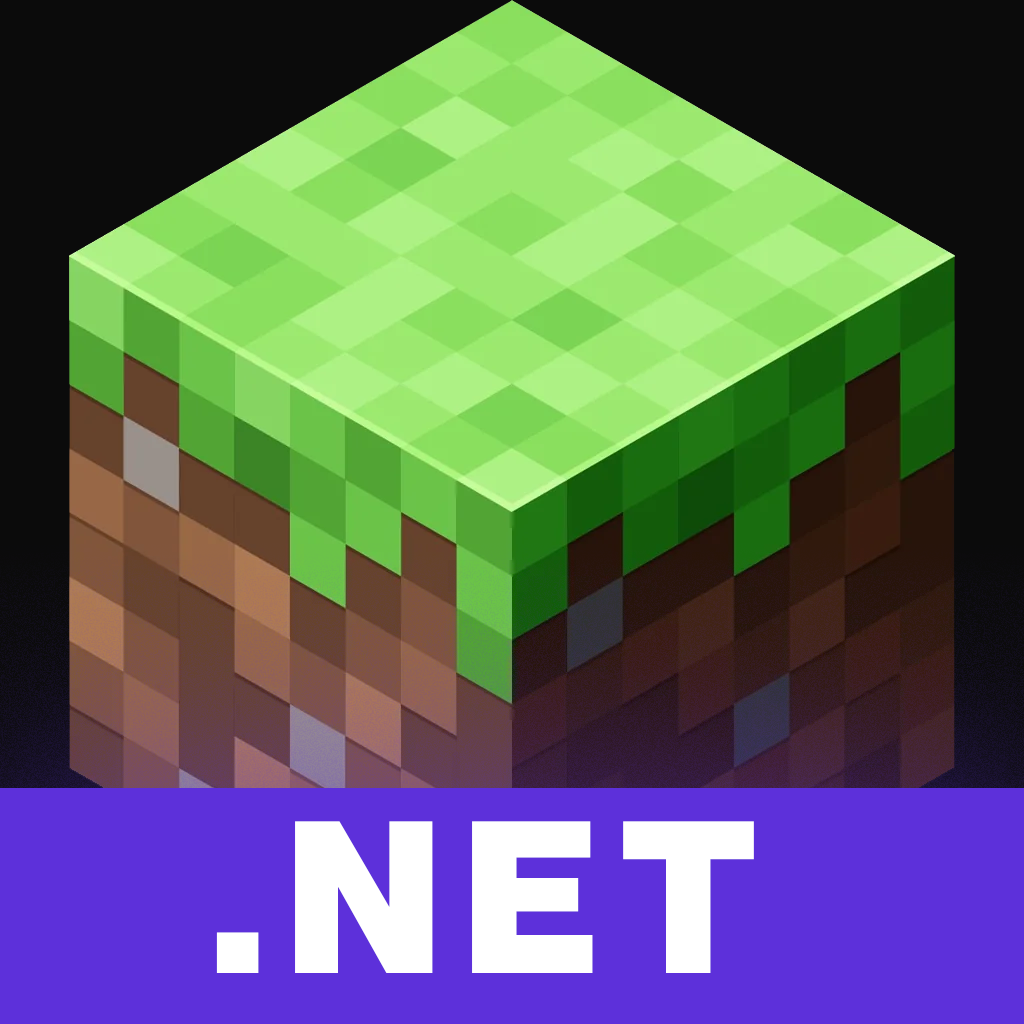
<style>
.page{position:relative;width:1024px;height:1024px}
.page>*{position:absolute;margin:0}
.t1{font:212.5px "NeueHaasDisplay-Black";letter-spacing:0.1em;color:#ffffff;text-transform:uppercase}
</style>
<div class="page">
<p class="t1" style="left:216px;top:821px;width:538px;height:152px">.NET</p>
</div>
